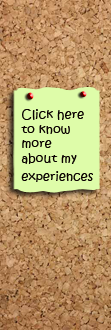
<style>
.page{position:relative;width:111px;height:330px}
.page>*{position:absolute;margin:0}
.t1{font:12px "KristenITC-Regular";color:#0a0101;scale:1.04 1}
</style>
<div class="page">
<p class="t1" style="left:21px;top:109px;width:72px;height:73px">Click here <br>to know <br>more <br>about my<br>experiences</p>
</div>
